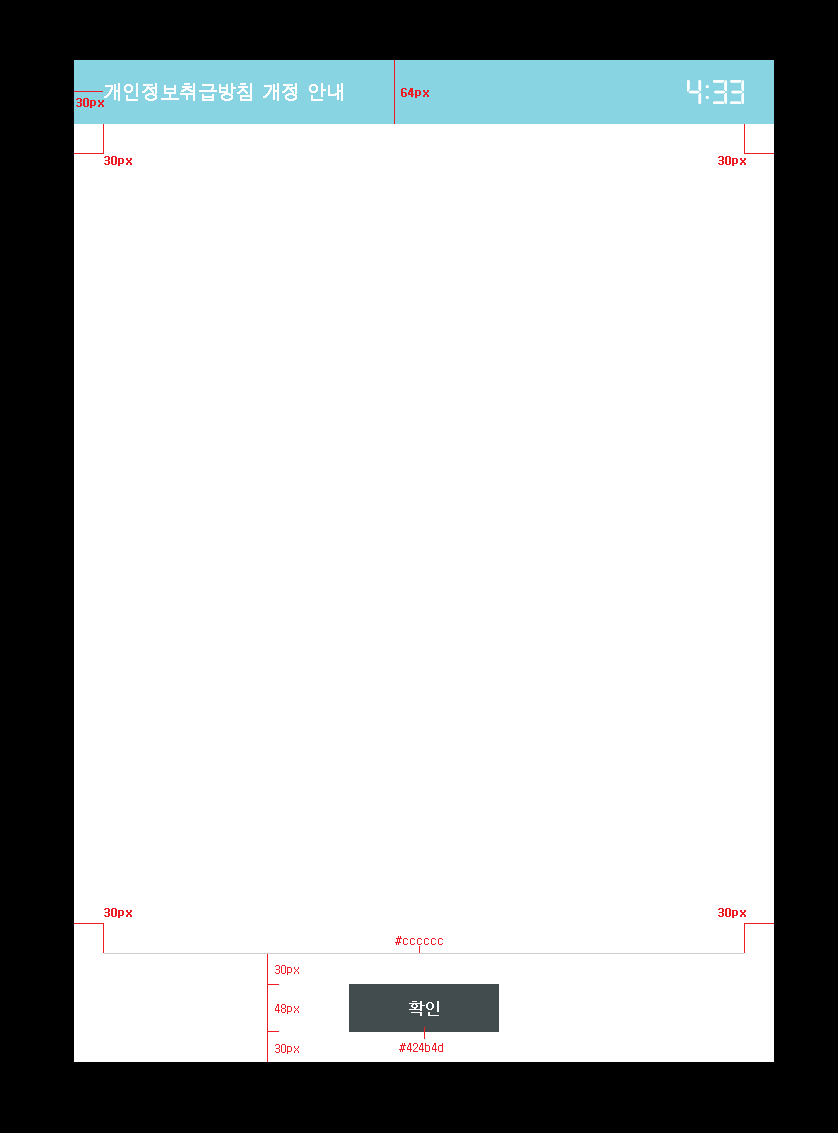
<style>
.page{position:relative;width:838px;height:1133px;background:#ffffff}
.page>*{position:absolute;margin:0}
.t1{font:18px "Dotum";color:#ffffff;font-weight:bold}
.t2{font:12px "Dotum";color:#ed1c24;font-weight:bold}
.t3{font:12px "Dotum";color:#ed1c24}
.t4{font:16px "Dotum";color:#ffffff;font-weight:bold}
</style>
<div class="page">
<p class="t1" style="left:104px;top:83px;width:239px;height:18px">개인정보취급방침 개정 안내</p>
<p class="t2" style="left:401px;top:88px;width:28px;height:10px">64px</p>
<p class="t2" style="left:76px;top:98px;width:28px;height:10px">30px</p>
<p class="t2" style="left:104px;top:156px;width:28px;height:10px">30px</p>
<p class="t2" style="left:718px;top:156px;width:28px;height:10px">30px</p>
<p class="t2" style="left:104px;top:908px;width:28px;height:10px">30px</p>
<p class="t2" style="left:718px;top:908px;width:28px;height:10px">30px</p>
<p class="t3" style="left:395px;top:936px;width:48px;height:9px">#cccccc</p>
<p class="t3" style="left:275px;top:965px;width:24px;height:10px">30px</p>
<p class="t4" style="left:409px;top:1001px;width:30px;height:15px">확인</p>
<p class="t3" style="left:275px;top:1004px;width:24px;height:10px">48px</p>
<p class="t3" style="left:275px;top:1044px;width:24px;height:10px">30px</p>
<p class="t3" style="left:399px;top:1043px;width:44px;height:9px">#424b4d</p>
</div>
